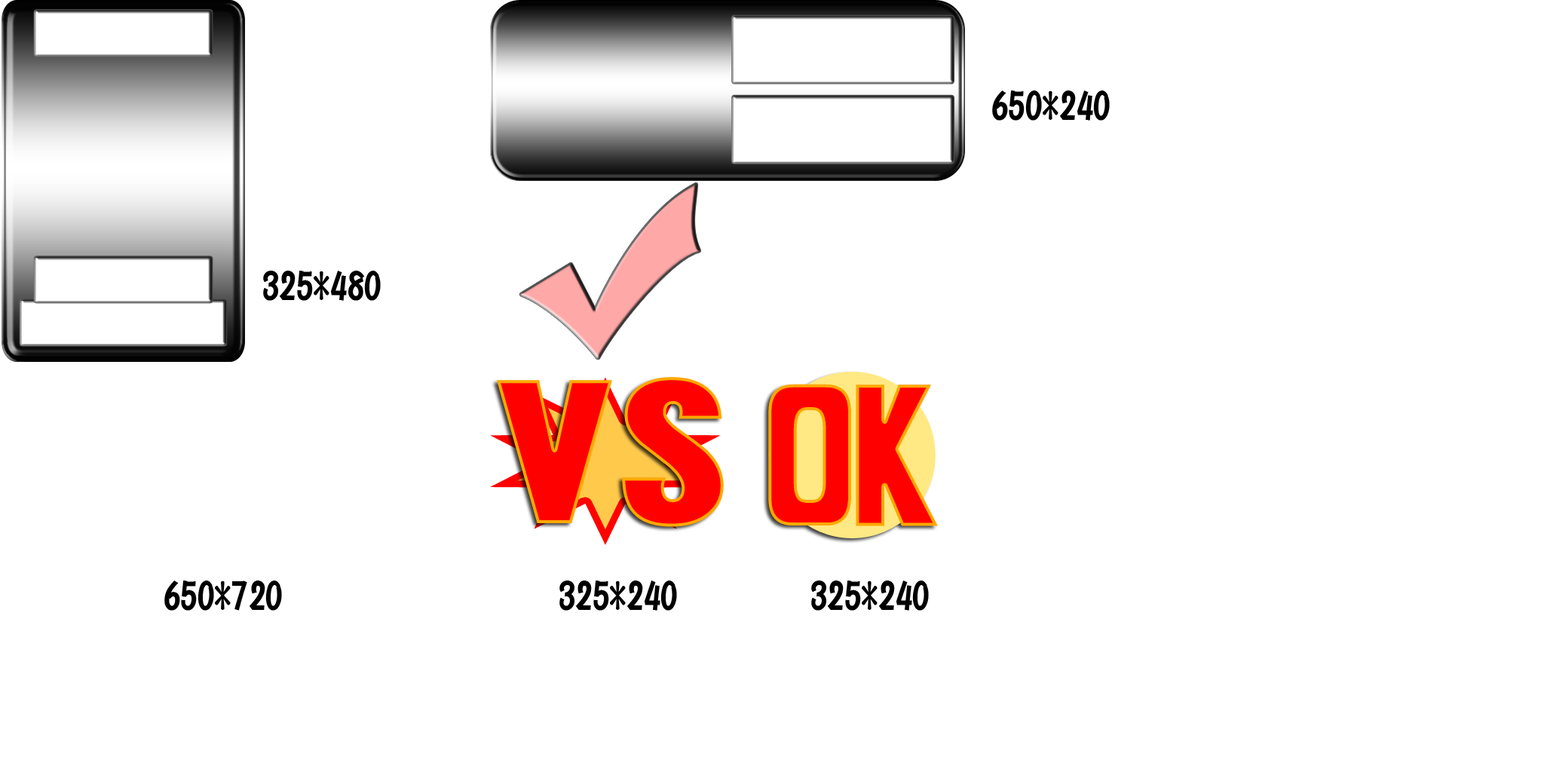
<style>
.page{position:relative;width:1544px;height:772px;background:#ffffff}
.page>*{position:absolute;margin:0}
.t1{font:34px "FA-PopB";color:#000000}
.t2{font:181px "DFGothic-SU-WIN-RKSJ-H";color:#ff0000;scale:1.31 1}
</style>
<div class="page">
<p class="t1" style="left:992px;top:90px;width:118px;height:31px">650*240</p>
<p class="t1" style="left:263px;top:271px;width:118px;height:30px">325*480</p>
<p class="t2" style="left:497px;top:377px;width:227px;height:150px">VS</p>
<p class="t1" style="left:164px;top:581px;width:118px;height:30px">650*720</p>
<p class="t1" style="left:560px;top:581px;width:117px;height:30px">325*240</p>
<p class="t1" style="left:811px;top:581px;width:118px;height:30px">325*240</p>
</div>
